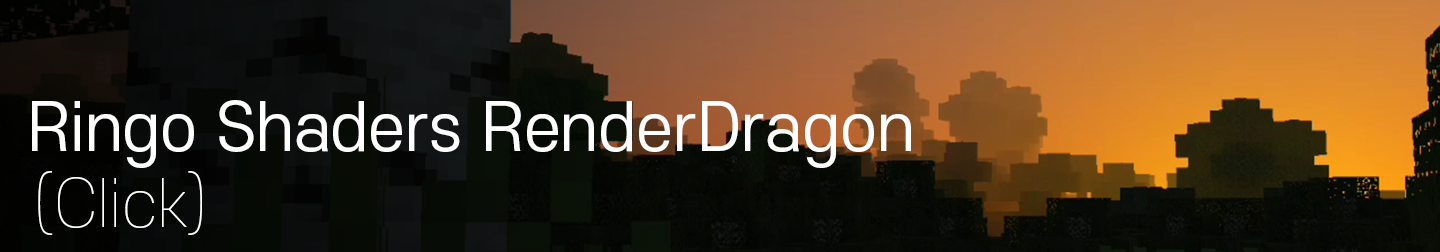
<style>
.page{position:relative;width:1440px;height:252px}
.page>*{position:absolute;margin:0}
.t1{font:64px "S-CoreDream-4Regular";color:#ffffff}
.t2{font:64px "S-CoreDream-1Thin";color:#ffffff}
</style>
<div class="page">
<p class="t1" style="left:32px;top:100px;width:879px;height:68px">Ringo Shaders RenderDragon</p>
<p class="t2" style="left:38px;top:171px;width:164px;height:64px">(Click)</p>
</div>
